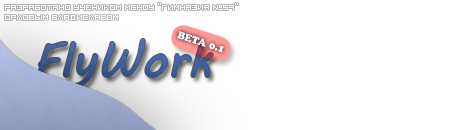
<style>
.page{position:relative;width:450px;height:130px;background:#ffffff}
.page>*{position:absolute;margin:0}
.t1{font:10px "Visitor_Rus";color:#ffffff}
.t2{font:10px "Visitor_Rus";color:#fdfdfd}
.t3{font:48px "MVBoli";color:#3e5d9f}
.t4{font:10px "CooperBlackStd";color:#ffffff}
</style>
<div class="page">
<p class="t1" style="left:5px;top:3px;width:233px;height:7px">Разработано учеником МБНОУ ‘’Гимназия №59’’</p>
<p class="t2" style="left:5px;top:15px;width:113px;height:5px">ОРЛОВЫМ ВЛАДИСЛАВОМ</p>
<p class="t3" style="left:38px;top:39px;width:175px;height:49px">FlyWork</p>
<p class="t4" style="left:177px;top:31px;width:47px;height:22px;rotate:18deg">BETA 0.1</p>
</div>
